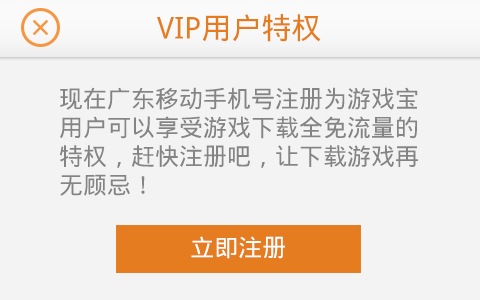
<style>
.page{position:relative;width:480px;height:300px;background:#f3f3f3}
.page>*{position:absolute;margin:0}
.t1{font:30px "DroidSansFallback";color:#e57c1f}
.t2{font:23.9px "DroidSansFallback";color:#858484}
.t3{font:24px "DroidSansFallback";color:#ffffff}
</style>
<div class="page">
<p class="t1" style="left:157px;top:14px;width:164px;height:28px">VIP用户特权</p>
<p class="t2" style="left:59px;top:87px;width:359px;height:109px">现在广东移动手机号注册为游戏宝<br>用户可以享受游戏下载全免流量的<br>特权，赶快注册吧，让下载游戏再<br>无顾忌！</p>
<p class="t3" style="left:191px;top:236px;width:94px;height:23px">立即注册</p>
</div>
